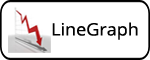
<style>
.page{position:relative;width:150px;height:60px;background:#ffffff}
.page>*{position:absolute;margin:0}
.t1{font:17.1px "OpenSans";color:#020202;scale:1.06 1}
</style>
<div class="page">
<p class="t1" style="left:52px;top:22px;width:86px;height:18px">LineGraph</p>
</div>
